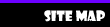
<style>
.page{position:relative;width:110px;height:27px;background:#000000}
.page>*{position:absolute;margin:0}
.t1{font:14px "ShowcardGothic-Reg";color:#ffffff}
</style>
<div class="page">
<p class="t1" style="left:44px;top:10px;width:61px;height:12px">Site map</p>
</div>
